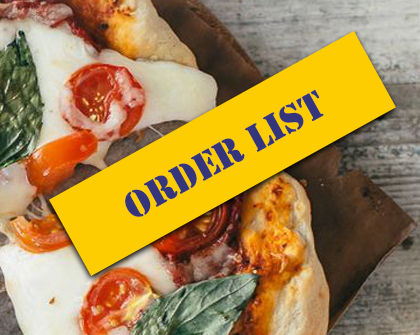
<style>
.page{position:relative;width:420px;height:335px}
.page>*{position:absolute;margin:0}
.t1{font:40px "Stencil";color:#35357c}
</style>
<div class="page">
<p class="t1" style="left:125px;top:89px;width:199px;height:128px;rotate:-29deg">ORDER LIST</p>
</div>
